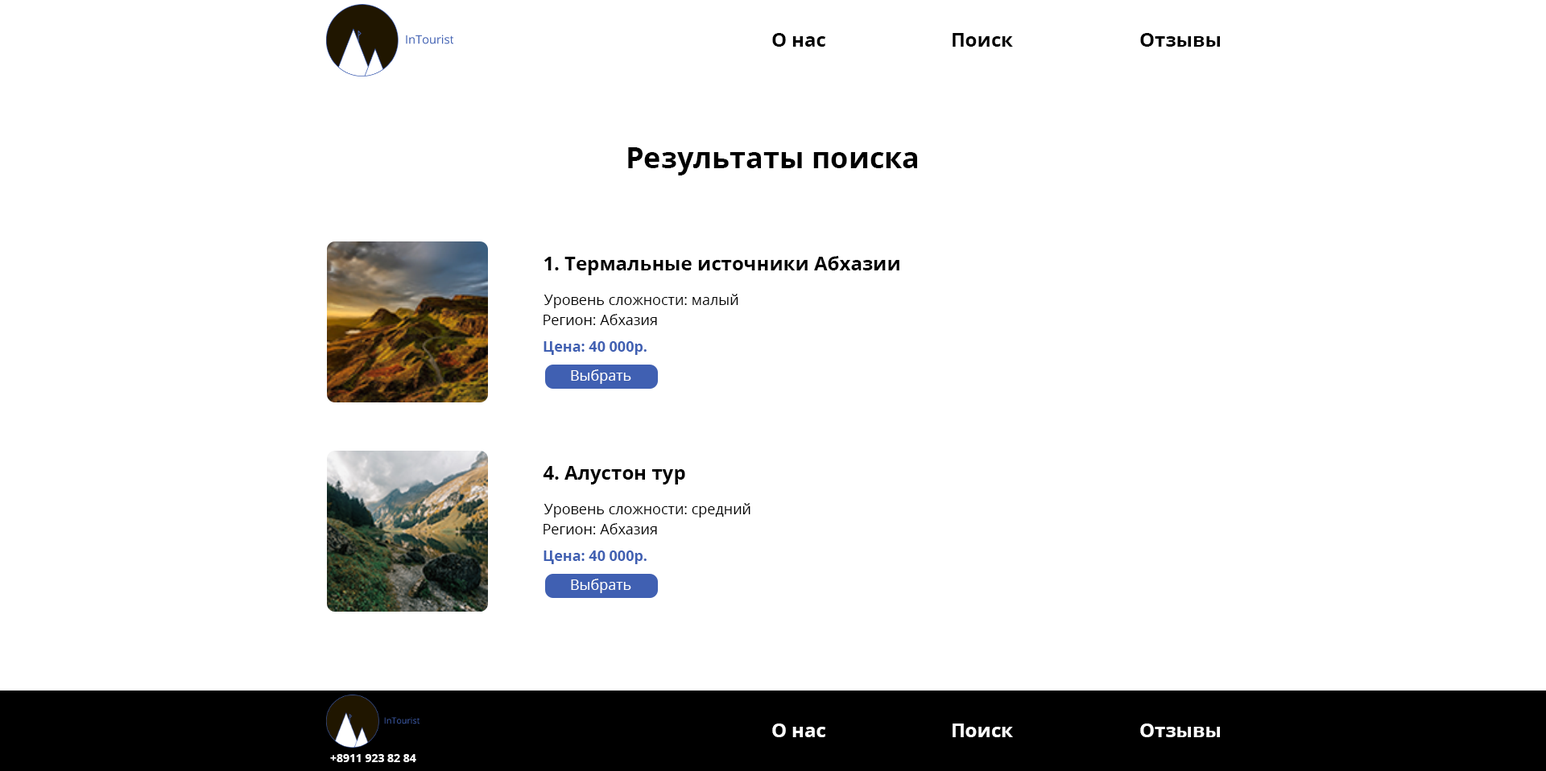
<style>
.page{position:relative;width:1546px;height:771px;background:#ffffff}
.page>*{position:absolute;margin:0}
.t1{font:19.3px "OpenSans-Bold";color:#000000}
.t2{font:29px "OpenSans-Bold";color:#000000}
.t3{font:14.5px "OpenSans-Regular";color:#000000}
.t4{font:14.5px "OpenSans-Bold";color:#4060b2}
.t5{font:14.5px "OpenSans-Regular";color:#ffffff}
.t6{font:19.3px "OpenSans-Bold";color:#ffffff}
.t7{font:11.3px "OpenSans-Bold";color:#ffffff}
</style>
<div class="page">
<p class="t1" style="left:772px;top:33px;width:53px;height:14px">О нас</p>
<p class="t1" style="left:953px;top:33px;width:60px;height:14px">Поиск</p>
<p class="t1" style="left:1140px;top:33px;width:80px;height:14px">Отзывы</p>
<p class="t2" style="left:628px;top:147px;width:289px;height:29px">Результаты поиска</p>
<p class="t1" style="left:544px;top:256px;width:355px;height:19px">1. Термальные источники Абхазии</p>
<p class="t3" style="left:543px;top:294px;width:195px;height:14px">Уровень сложности: малый</p>
<p class="t3" style="left:543px;top:314px;width:114px;height:11px">Регион: Абхазия</p>
<p class="t4" style="left:543px;top:341px;width:104px;height:14px">Цена: 40 000р.</p>
<p class="t5" style="left:571px;top:370px;width:60px;height:14px">Выбрать</p>
<p class="t1" style="left:543px;top:466px;width:142px;height:19px">4. Алустон тур</p>
<p class="t3" style="left:543px;top:503px;width:207px;height:15px">Уровень сложности: средний</p>
<p class="t3" style="left:543px;top:523px;width:114px;height:12px">Регион: Абхазия</p>
<p class="t4" style="left:543px;top:551px;width:104px;height:13px">Цена: 40 000р.</p>
<p class="t5" style="left:571px;top:579px;width:60px;height:14px">Выбрать</p>
<p class="t6" style="left:772px;top:724px;width:53px;height:14px">О нас</p>
<p class="t6" style="left:953px;top:724px;width:60px;height:14px">Поиск</p>
<p class="t6" style="left:1140px;top:724px;width:80px;height:14px">Отзывы</p>
<p class="t7" style="left:330px;top:754px;width:86px;height:8px">+8911 923 82 84</p>
</div>
